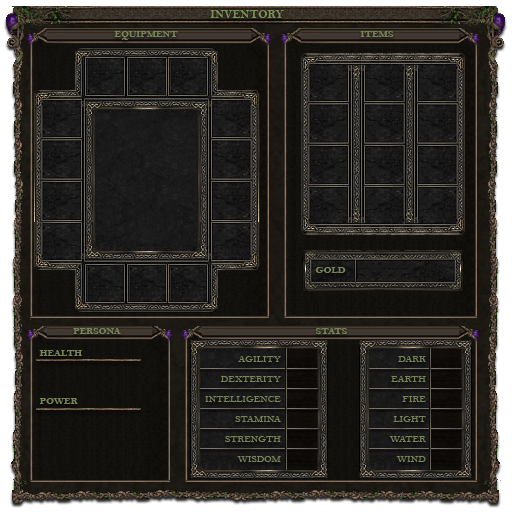
<style>
.page{position:relative;width:512px;height:512px}
.page>*{position:absolute;margin:0}
.t1{font:12px "BellMTBold";color:#7f8e5a}
.t2{font:10px "BellMTBold";color:#778458}
.t3{font:10px/20px "BellMT";color:#778458}
</style>
<div class="page">
<p class="t1" style="left:210px;top:10px;width:74px;height:8px">INVENTORY</p>
<p class="t2" style="left:114px;top:31px;width:64px;height:9px">EQUIPMENT</p>
<p class="t2" style="left:360px;top:31px;width:34px;height:6px">ITEMS</p>
<p class="t2" style="left:315px;top:267px;width:31px;height:6px">GOLD</p>
<p class="t2" style="left:73px;top:328px;width:48px;height:6px">PERSONA</p>
<p class="t2" style="left:316px;top:328px;width:31px;height:6px">STATS</p>
<p class="t2" style="left:39px;top:350px;width:43px;height:54px">HEALTH<br><br><br><br>POWER</p>
<p class="t3" style="left:205px;top:356px;width:76px;height:106px;text-align:right">AGILITY<br>DEXTERITY<br>INTELLIGENCE<br>STAMINA<br>STRENGTH<br>WISDOM</p>
<p class="t3" style="left:389px;top:356px;width:37px;height:106px;text-align:right">DARK<br>EARTH<br>FIRE<br>LIGHT<br>WATER<br>WIND</p>
</div>
